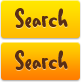
<style>
.page{position:relative;width:82px;height:82px}
.page>*{position:absolute;margin:0}
.t1{font:26px "Duffy-Bold";color:#592e14}
</style>
<div class="page">
<p class="t1" style="left:15px;top:8px;width:53px;height:20px">Search</p>
<p class="t1" style="left:15px;top:50px;width:53px;height:20px">Search</p>
</div>
